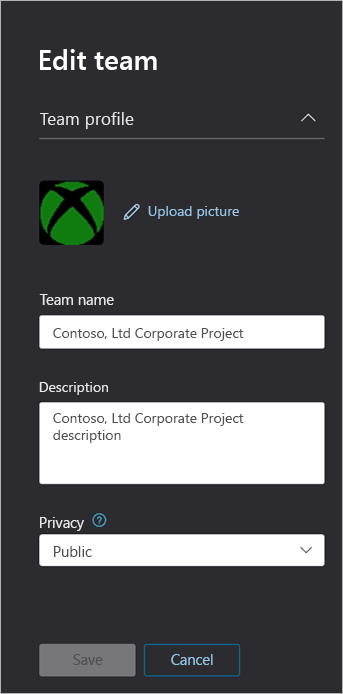
<style>
.page{position:relative;width:343px;height:694px;background:#2b2b30}
.page>*{position:absolute;margin:0}
.t1{font:28px "SegoeUI-Semibold";color:#ffffff}
.t2{font:17.3px "SegoeUI";color:#e6e6e6}
.t3{font:14px "SegoeUI";color:#94c5e4}
.t4{font:14.7px "SegoeUI";color:#e6e6e6}
.t5{font:14px "SegoeUI";color:#505050}
.t6{font:14px "SegoeUI";color:#e6e6e6}
.t7{font:14.7px "SegoeUI";color:#505050}
.t8{font:14.7px "SegoeUI";color:#94c5e4}
</style>
<div class="page">
<p class="t1" style="left:40px;top:49px;width:117px;height:21px">Edit team</p>
<p class="t2" style="left:40px;top:112px;width:94px;height:17px">Team profile</p>
<p class="t3" style="left:148px;top:206px;width:91px;height:13px">Upload picture</p>
<p class="t4" style="left:39px;top:294px;width:75px;height:11px">Team name</p>
<p class="t5" style="left:53px;top:328px;width:191px;height:13px">Contoso, Ltd Corporate Project</p>
<p class="t6" style="left:39px;top:382px;width:69px;height:13px">Description</p>
<p class="t5" style="left:53px;top:413px;width:191px;height:30px">Contoso, Ltd Corporate Project<br>description</p>
<p class="t4" style="left:40px;top:517px;width:44px;height:14px">Privacy</p>
<p class="t7" style="left:54px;top:546px;width:38px;height:11px">Public</p>
<p class="t7" style="left:73px;top:654px;width:30px;height:11px">Save</p>
<p class="t8" style="left:171px;top:654px;width:42px;height:11px">Cancel</p>
</div>
